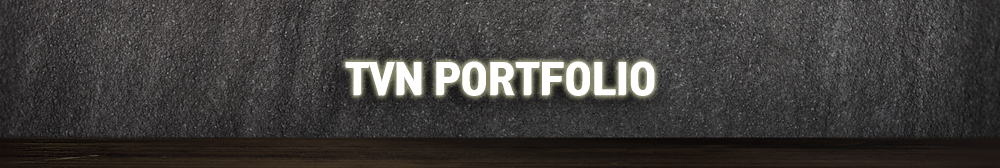
<style>
.page{position:relative;width:1000px;height:168px}
.page>*{position:absolute;margin:0}
.t1{font:38.4px "TmonMonsoriBlack";color:#ffffff}
</style>
<div class="page">
<p class="t1" style="left:345px;top:61px;width:310px;height:35px">TVN PORTFOLIO</p>
</div>
